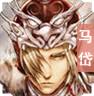
<style>
.page{position:relative;width:94px;height:96px}
.page>*{position:absolute;margin:0}
.t1{font:15px "SimHei";color:#ffffff;font-weight:bold}
</style>
<div class="page">
<p class="t1" style="left:78px;top:30px;width:15px;height:36px">马 岱</p>
</div>
